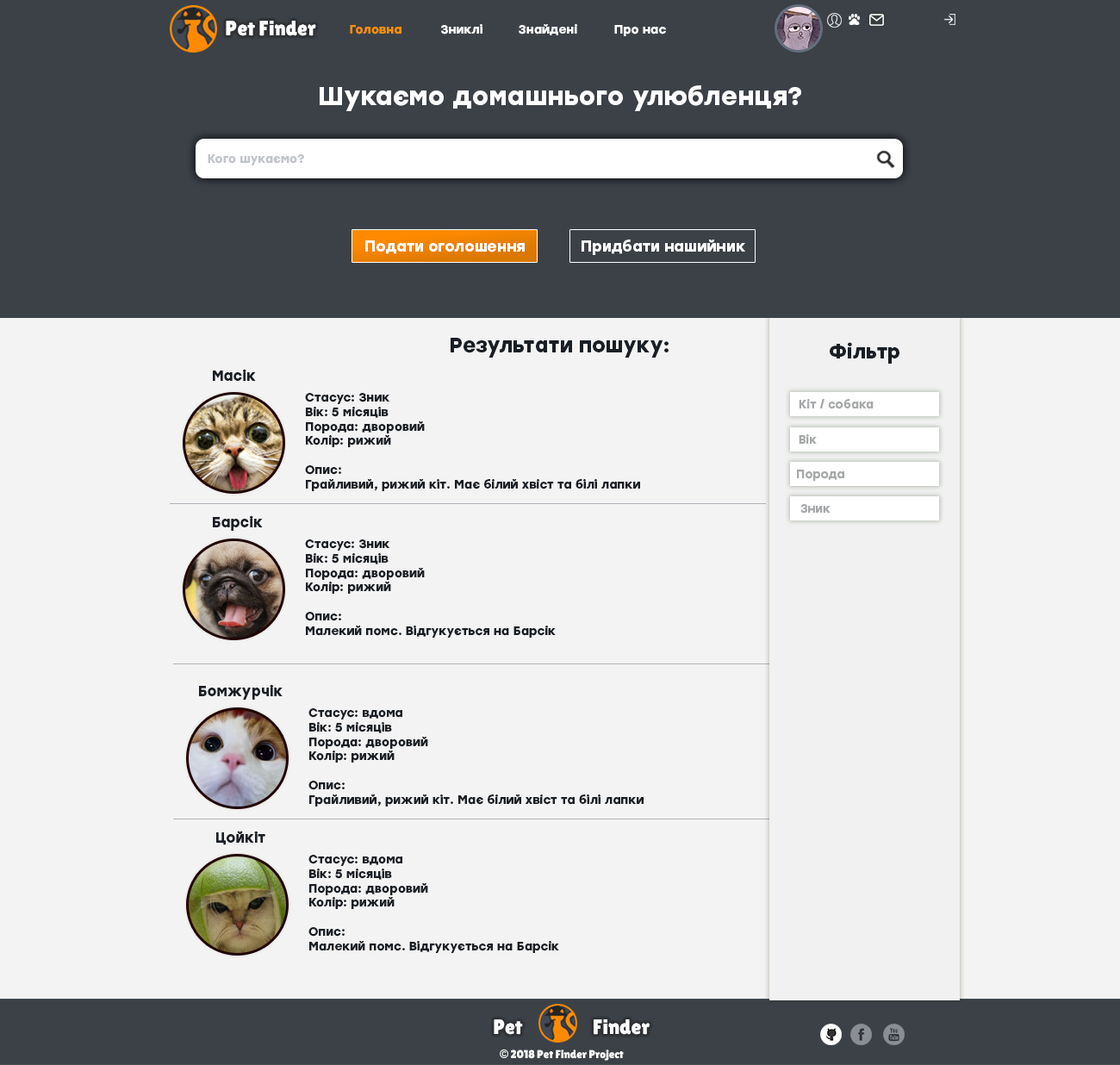
<style>
.page{position:relative;width:1120px;height:1065px;background:#f4f3f3}
.page>*{position:absolute;margin:0}
.t1{font:20.7px "LilitaOne";color:#ffffff}
.t2{font:12.1px "Stolzl-Bold";color:#ff9001}
.t3{font:12.1px "Stolzl-Bold";color:#ffffff}
.t4{font:25.8px "Stolzl-Bold";color:#ffffff}
.t5{font:12.1px "Stolzl-Bold";color:#c0c4c9}
.t6{font:15px "Stolzl-Bold";color:#ffffff}
.t7{font:20.7px "Stolzl-Bold";color:#181e24}
.t8{font:19.9px "Stolzl-Bold";color:#181e24}
.t9{font:14.4px "Stolzl-Bold";color:#181e24}
.t10{font:12px "Stolzl-Bold";color:#181e24}
.t11{font:11.9px "Stolzl-Bold";color:#a6a8a9}
.t12{font:11.4px "LilitaOne";color:#ffffff}
.t13{font:11.4px "GillSans-UltraBold";color:#ffffff}
</style>
<div class="page">
<p class="t1" style="left:226px;top:21px;width:90px;height:15px">Pet Finder</p>
<p class="t2" style="left:350px;top:25px;width:51px;height:9px">Головна</p>
<p class="t3" style="left:441px;top:24px;width:41px;height:10px">Зниклі</p>
<p class="t3" style="left:519px;top:24px;width:58px;height:11px">Знайдені</p>
<p class="t3" style="left:614px;top:25px;width:52px;height:11px">Про нас</p>
<p class="t4" style="left:320px;top:85px;width:481px;height:26px">Шукаємо домашнього улюбленця?</p>
<p class="t5" style="left:208px;top:154px;width:96px;height:11px">Кого шукаємо?</p>
<p class="t6" style="left:365px;top:240px;width:160px;height:14px">Подати оголошення</p>
<p class="t6" style="left:581px;top:239px;width:164px;height:16px">Придбати нашийник</p>
<p class="t7" style="left:451px;top:338px;width:217px;height:20px">Результати пошуку:</p>
<p class="t8" style="left:830px;top:342px;width:69px;height:22px">Фільтр</p>
<p class="t9" style="left:213px;top:369px;width:43px;height:12px">Масік</p>
<p class="t10" style="left:305px;top:393px;width:335px;height:98px">Стасус: Зник<br>Вік: 5 місяців<br>Порода: дворовий<br>Колір: рижий<br><br>Опис: <br>Грайливий, рижий кіт. Має білий хвіст та білі лапки</p>
<p class="t11" style="left:799px;top:399px;width:75px;height:10px">Кіт / собака</p>
<p class="t11" style="left:799px;top:434px;width:18px;height:10px">Вік</p>
<p class="t11" style="left:797px;top:469px;width:47px;height:12px">Порода</p>
<p class="t11" style="left:800px;top:504px;width:30px;height:9px">Зник</p>
<p class="t9" style="left:213px;top:515px;width:50px;height:16px">Барсік</p>
<p class="t10" style="left:305px;top:539px;width:251px;height:98px">Стасус: Зник<br>Вік: 5 місяців<br>Порода: дворовий<br>Колір: рижий<br><br>Опис: <br>Малекий помс. Відгукується на Барсік</p>
<p class="t9" style="left:199px;top:684px;width:84px;height:16px">Бомжурчік</p>
<p class="t10" style="left:308px;top:708px;width:336px;height:98px">Стасус: вдома<br>Вік: 5 місяців<br>Порода: дворовий<br>Колір: рижий<br><br>Опис: <br>Грайливий, рижий кіт. Має білий хвіст та білі лапки</p>
<p class="t9" style="left:216px;top:830px;width:49px;height:15px">Цойкіт</p>
<p class="t10" style="left:308px;top:855px;width:251px;height:98px">Стасус: вдома<br>Вік: 5 місяців<br>Порода: дворовий<br>Колір: рижий<br><br>Опис: <br>Малекий помс. Відгукується на Барсік</p>
<p class="t1" style="left:494px;top:1019px;width:29px;height:16px">Pet</p>
<p class="t1" style="left:594px;top:1019px;width:56px;height:16px">Finder</p>
<p class="t12" style="left:500px;top:1049px;width:124px;height:11px"><span class="t13">©</span> 2018 Pet Finder Project</p>
</div>
